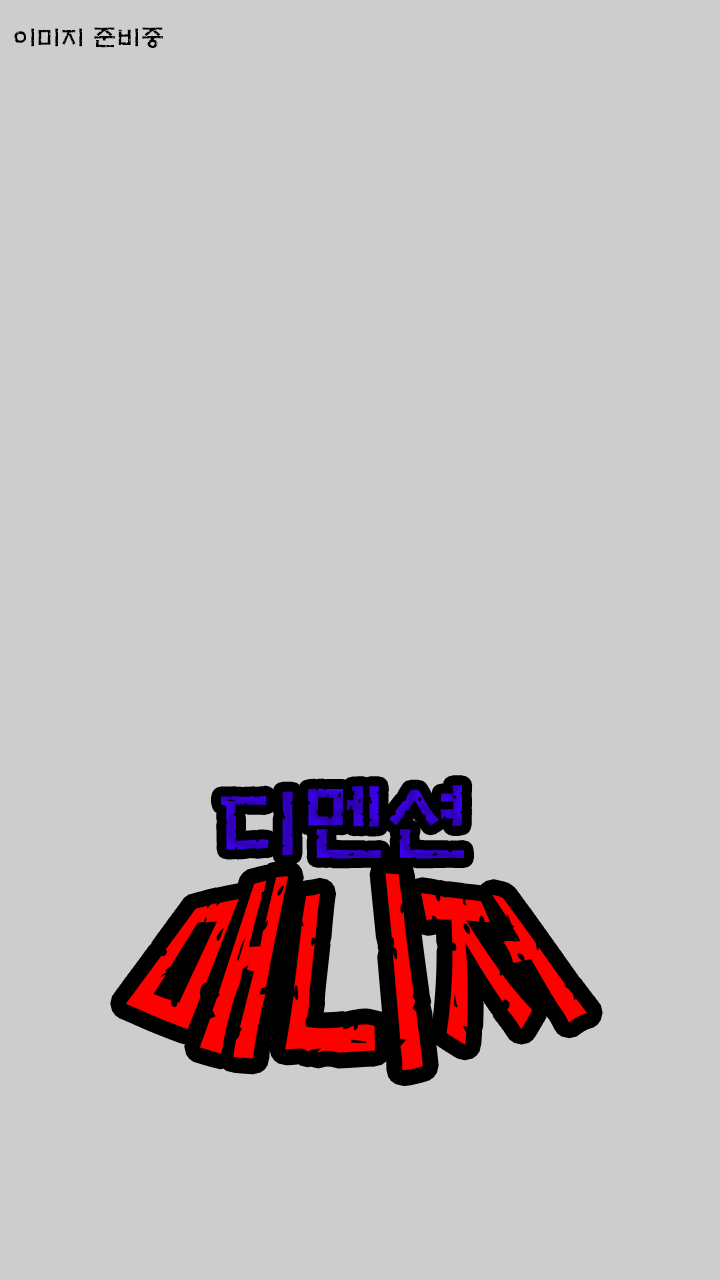
<style>
.page{position:relative;width:720px;height:1280px;background:#cdcdcd}
.page>*{position:absolute;margin:0}
.t1{font:24px "H2mkpB";color:#000000}
.t2{font:85px "H2mkpB";color:#3400c7}
.t3{font:136px "H2mkpB";color:#ff0000}
</style>
<div class="page">
<p class="t1" style="left:14px;top:27px;width:149px;height:22px">이미지 준비중</p>
<p class="t2" style="left:221px;top:785px;width:243px;height:74px">디멘션</p>
<p class="t3" style="left:126px;top:873px;width:461px;height:197px">매니저</p>
</div>
